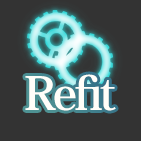
<style>
.page{position:relative;width:141px;height:141px;background:#333333}
.page>*{position:absolute;margin:0}
.t1{font:48px "HeiseiMinStd-W7";letter-spacing:-0.04em;color:#fffef9}
</style>
<div class="page">
<p class="t1" style="left:25px;top:74px;width:91px;height:37px">Refit</p>
</div>
